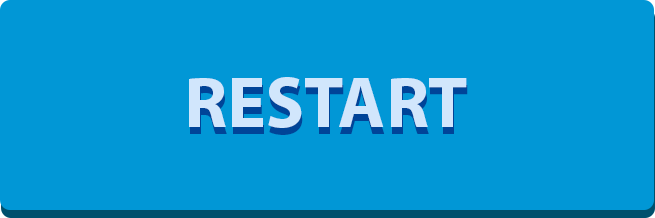
<style>
.page{position:relative;width:655px;height:218px;background:#0197d6}
.page>*{position:absolute;margin:0}
.t1{font:72px "MyriadPro-Bold";color:#d1e6fc}
.t2{font:72px "MyriadPro-Bold"}
</style>
<div class="page">
<p class="t1" style="left:189px;top:77px;width:278px;height:51px">RESTART</p>
<p class="t2" style="left:190px;top:84px;width:278px;height:51px">RESTART</p>
</div>
